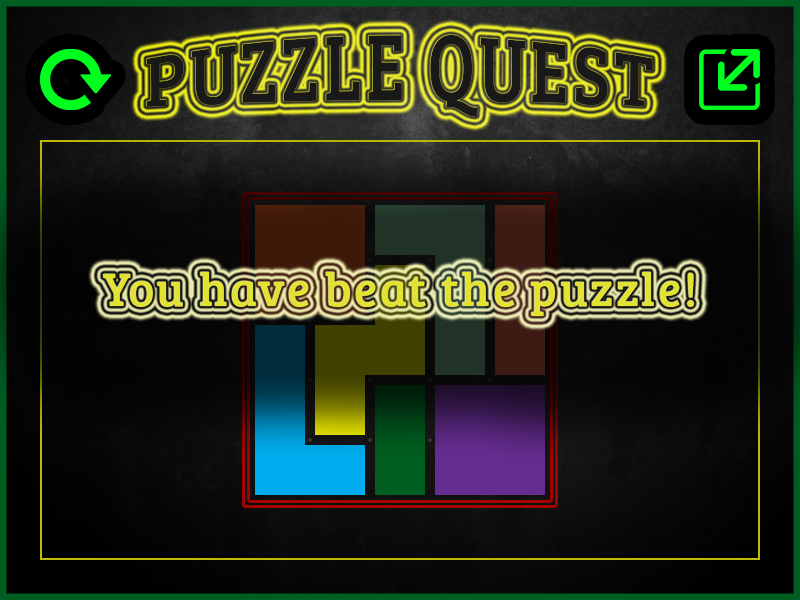
<style>
.page{position:relative;width:800px;height:600px}
.page>*{position:absolute;margin:0}
.t1{font:72px "BreeSerif-Regular";letter-spacing:0.05em;color:#191919}
.t2{font:48px "BreeSerif-Regular";letter-spacing:0.05em;color:#e2e233}
</style>
<div class="page">
<p class="t1" style="left:146px;top:34px;width:507px;height:83px">PUZZLE QUEST</p>
<p class="t2" style="left:103px;top:272px;width:591px;height:44px">You have beat the puzzle!</p>
</div>
